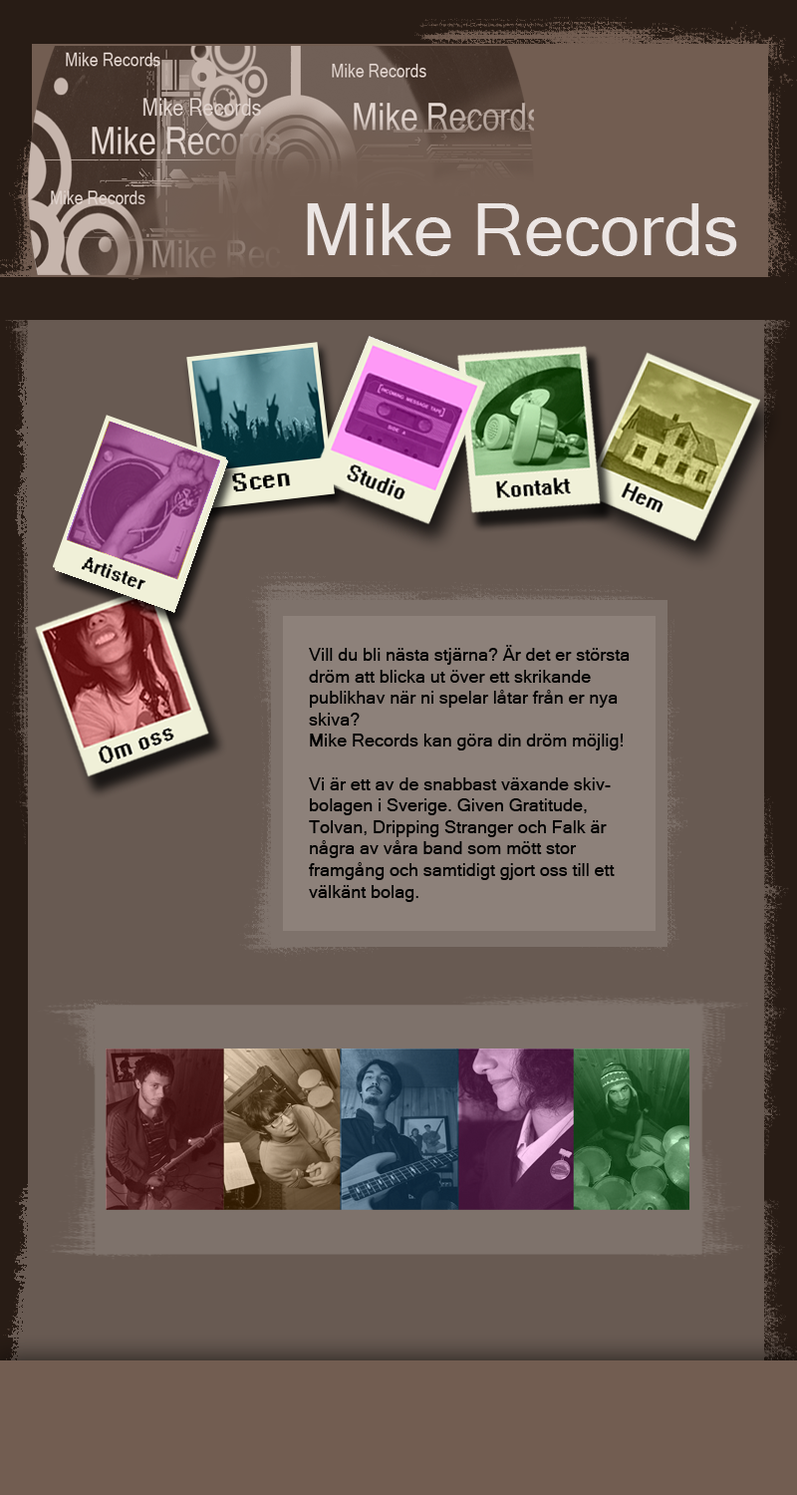
<style>
.page{position:relative;width:797px;height:1495px;background:#685a52}
.page>*{position:absolute;margin:0}
.t1{font:17.9px "MicrosoftSansSerif";color:#000000}
</style>
<div class="page">
<p class="t1" style="left:309px;top:645px;width:321px;height:257px">Vill du bli nästa stjärna? Är det er största <br>dröm att blicka ut över ett skrikande <br>publikhav när ni spelar låtar från er nya <br>skiva?<br>Mike Records kan göra din dröm möjlig!<br><br>Vi är ett av de snabbast växande skiv-<br>bolagen i Sverige. Given Gratitude,<br>Tolvan, Dripping Stranger och Falk är <br>några av våra band som mött stor<br>framgång och samtidigt gjort oss till ett<br>välkänt bolag.</p>
</div>
